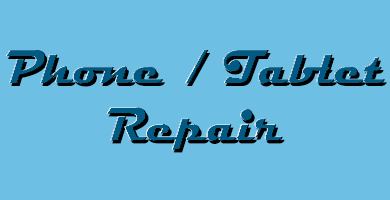
<style>
.page{position:relative;width:390px;height:200px;background:#6ebfe4}
.page>*{position:absolute;margin:0}
.t1{font:48px "Magneto-Bold"}
</style>
<div class="page">
<p class="t1" style="left:7px;top:53px;width:380px;height:100px;text-align:center">Phone / Tablet<br>Repair</p>
</div>
